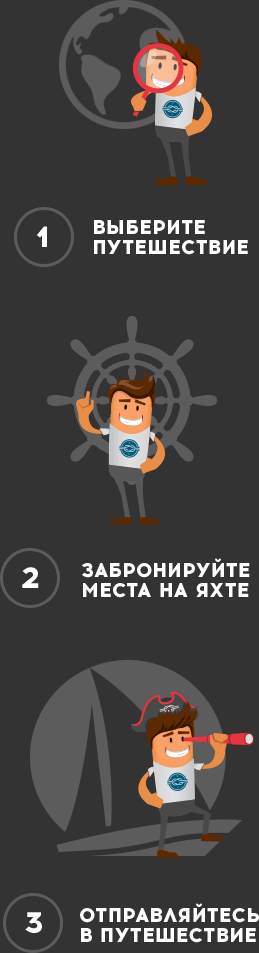
<style>
.page{position:relative;width:259px;height:953px;background:#333333}
.page>*{position:absolute;margin:0}
.t1{font:20px/20px "Acrom-ExtraBold";color:#ffffff;text-transform:uppercase}
.t2{font:30px "Acrom-ExtraBold";color:#ffffff}
</style>
<div class="page">
<p class="t1" style="left:94px;top:220px;width:154px;height:35px">выберите <br>путешествие</p>
<p class="t2" style="left:36px;top:226px;width:11px;height:21px">1</p>
<p class="t1" style="left:81px;top:558px;width:169px;height:40px">забронируйте <br>места на яхте</p>
<p class="t2" style="left:22px;top:567px;width:17px;height:21px">2</p>
<p class="t1" style="left:80px;top:903px;width:179px;height:40px">Отправляйтесь <br>в путешествие</p>
<p class="t2" style="left:25px;top:912px;width:17px;height:21px">3</p>
</div>
